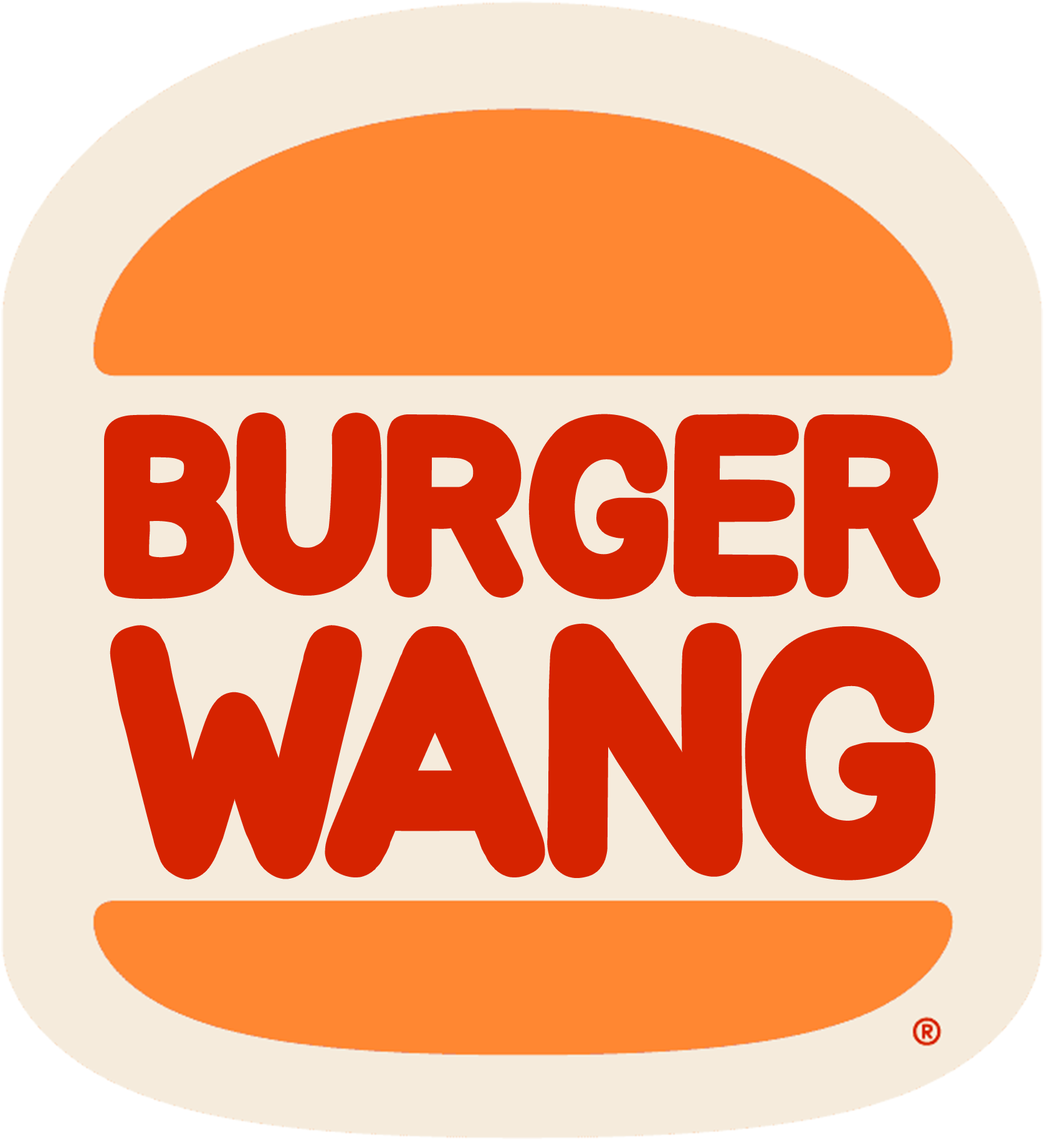
<style>
.page{position:relative;width:1045px;height:1141px;background:#f5ebdc}
.page>*{position:absolute;margin:0}
.t1{font:236.8px "BMJUA";letter-spacing:-0.025em;color:#d62300;font-weight:bold}
.t2{font:328.7px "BMJUA";letter-spacing:-0.05em;color:#d62300;font-weight:bold}
.t3{font:328.7px "BMJUA";letter-spacing:-0.17em;color:#d62300;font-weight:bold}
</style>
<div class="page">
<p class="t1" style="left:108px;top:416px;width:829px;height:180px">BURGER</p>
<p class="t2" style="left:113px;top:626px;width:819px;height:251px"><span class="t3">W</span>ANG</p>
</div>
